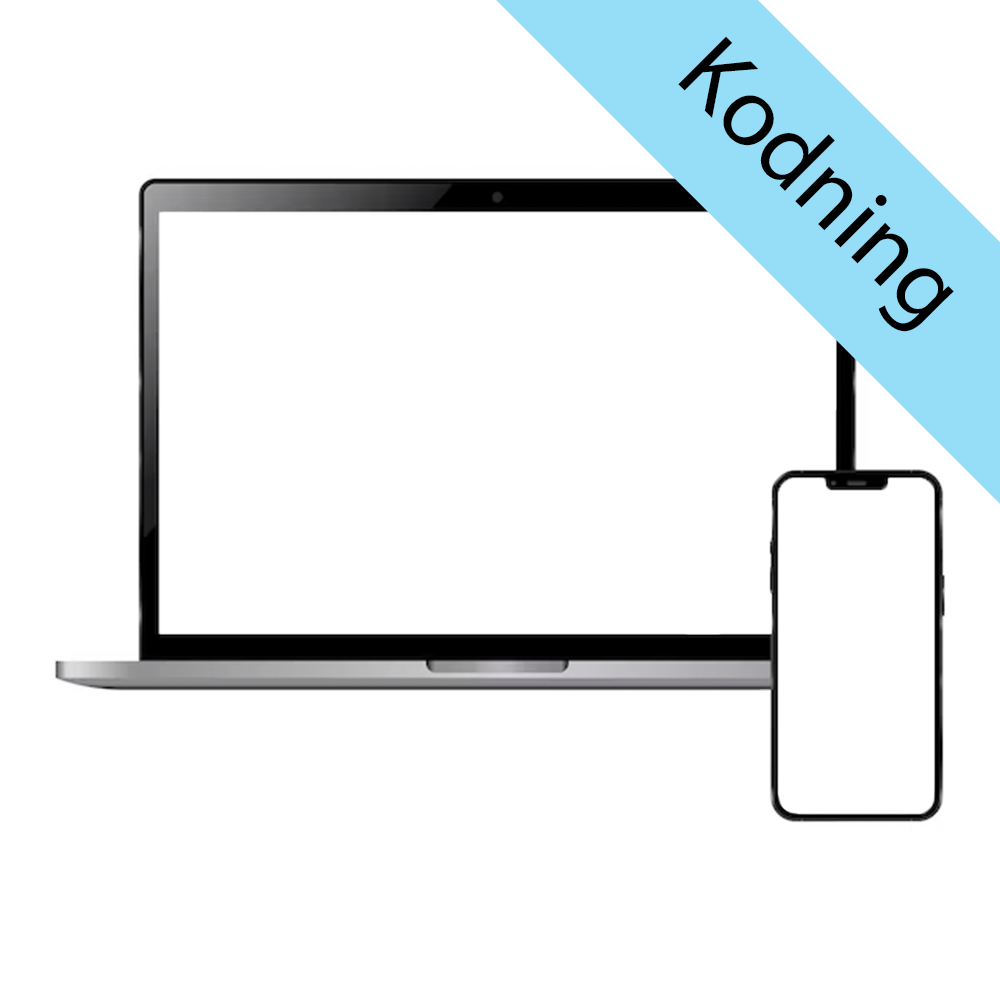
<style>
.page{position:relative;width:1000px;height:1000px;background:#ffffff}
.page>*{position:absolute;margin:0}
.t1{font:100px "MyriadPro-Regular";color:#000000}
</style>
<div class="page">
<p class="t1" style="left:678px;top:36px;width:276px;height:296px;rotate:45deg">Kodning</p>
</div>
